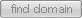
<style>
.page{position:relative;width:82px;height:18px}
.page>*{position:absolute;margin:0}
.t1{font:11px "Geneva";color:#8e8e8e}
</style>
<div class="page">
<p class="t1" style="left:11px;top:4px;width:61px;height:9px">find domain</p>
</div>
